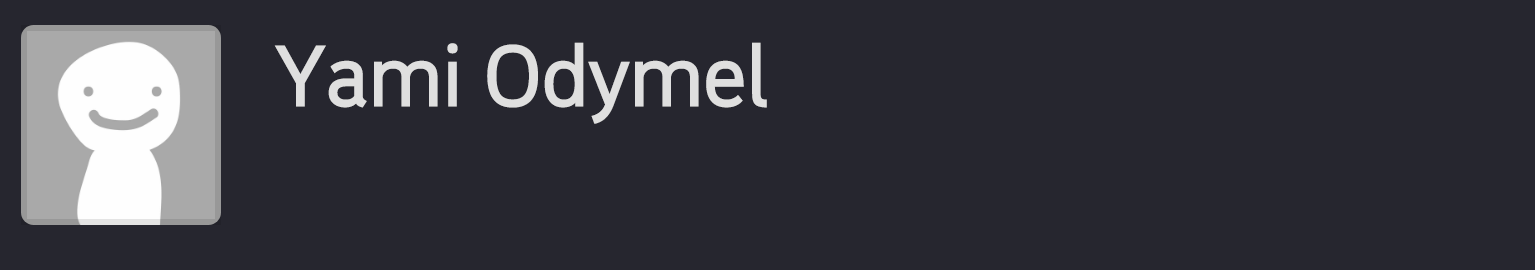
<style>
.page{position:relative;width:1535px;height:270px;background:#26262f}
.page>*{position:absolute;margin:0}
.t1{font:80.2px "CandyGothic";color:#dfdfdf}
</style>
<div class="page">
<p class="t1" style="left:274px;top:42px;width:493px;height:82px">Yami Odymel</p>
</div>
